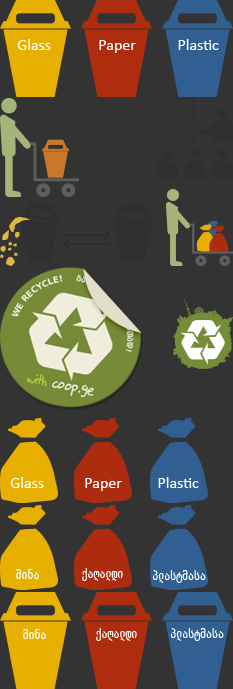
<style>
.page{position:relative;width:233px;height:689px;background:#333333}
.page>*{position:absolute;margin:0}
.t1{font:16px "Calibri";color:#ffffff}
.t2{font:13.2px "Menlo-Regular";color:#ffffff;scale:0.75 1}
</style>
<div class="page">
<p class="t1" style="left:17px;top:39px;width:34px;height:11px">Glass</p>
<p class="t1" style="left:99px;top:40px;width:37px;height:13px">Paper</p>
<p class="t1" style="left:178px;top:39px;width:41px;height:11px">Plastic</p>
<p class="t1" style="left:10px;top:477px;width:34px;height:11px">Glass</p>
<p class="t1" style="left:85px;top:478px;width:37px;height:13px">Paper</p>
<p class="t1" style="left:158px;top:477px;width:41px;height:11px">Plastic</p>
<p class="t2" style="left:16px;top:569px;width:23px;height:10px">მინა</p>
<p class="t2" style="left:82px;top:568px;width:41px;height:13px">ქაღალდი</p>
<p class="t2" style="left:152px;top:570px;width:54px;height:13px">პლასტმასა</p>
<p class="t2" style="left:23px;top:629px;width:23px;height:10px">მინა</p>
<p class="t2" style="left:96px;top:628px;width:41px;height:13px">ქაღალდი</p>
<p class="t2" style="left:170px;top:628px;width:54px;height:13px">პლასტმასა</p>
</div>
